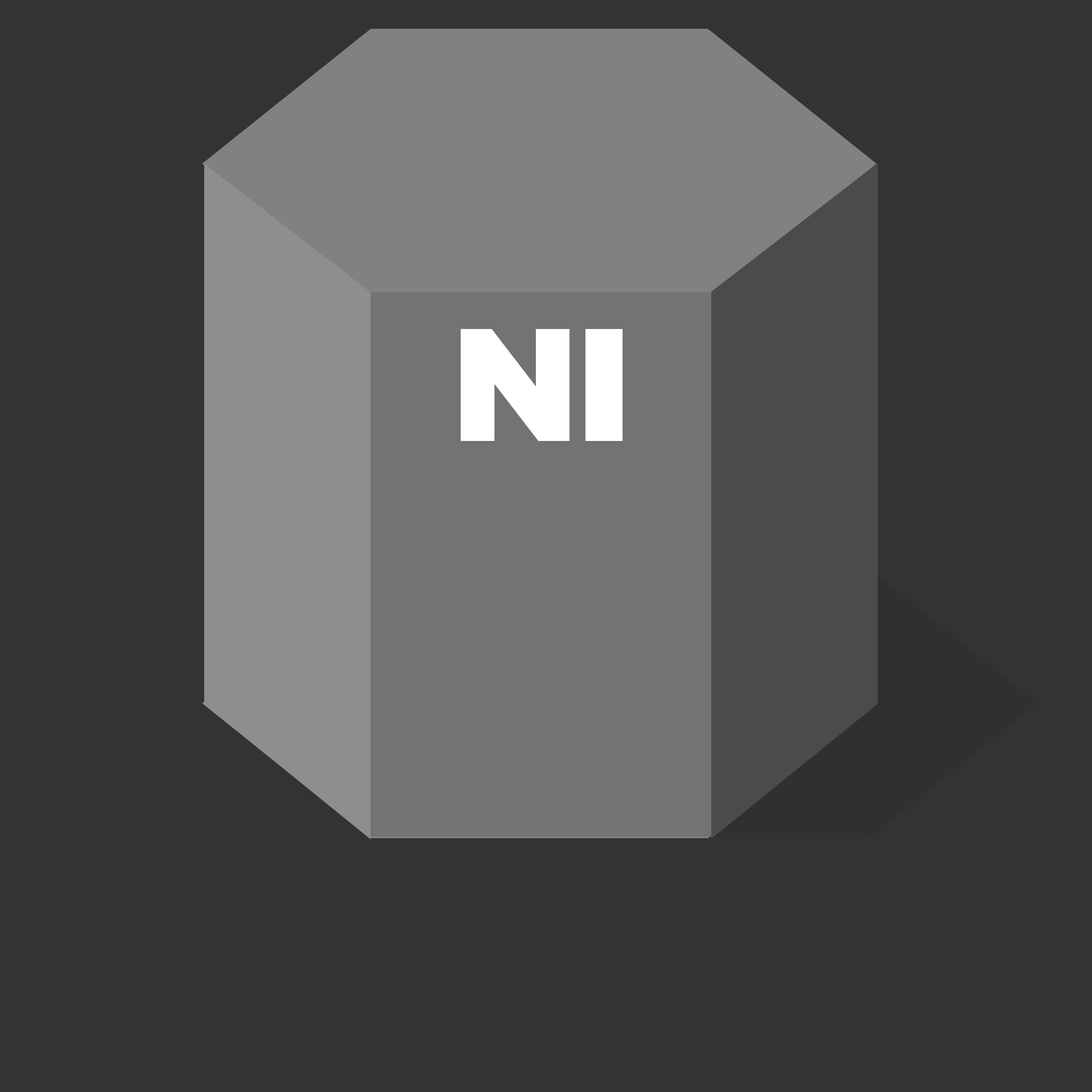
<style>
.page{position:relative;width:1092px;height:1092px;background:#333333}
.page>*{position:absolute;margin:0}
.t1{font:160px "Montserrat-Black";color:#ffffff}
</style>
<div class="page">
<p class="t1" style="left:461px;top:329px;width:162px;height:112px">NI</p>
</div>
